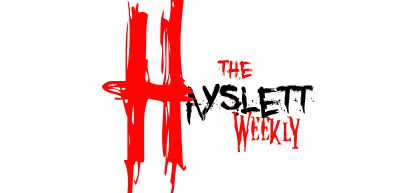
<style>
.page{position:relative;width:411px;height:193px;background:#ffffff}
.page>*{position:absolute;margin:0}
.t1{font:33.3px "YouMurdererBB";color:#ff0405}
.t2{font:58.3px "YouMurdererBB";color:#000000}
.t3{font:50px "Nightmare-5-Regular";color:#ff0405}
</style>
<div class="page">
<p class="t1" style="left:217px;top:59px;width:37px;height:21px">the</p>
<p class="t2" style="left:185px;top:83px;width:130px;height:42px">ayslett</p>
<p class="t3" style="left:231px;top:111px;width:69px;height:41px">Weekly</p>
</div>
